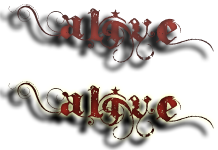
<style>
.page{position:relative;width:218px;height:150px;background:#ffffff}
.page>*{position:absolute;margin:0}
.t1{font:72px "Ithornt";letter-spacing:0.07em}
</style>
<div class="page">
<p class="t1" style="left:8px;top:4px;width:206px;height:59px;rotate:3deg">Alive</p>
<p class="t1" style="left:8px;top:81px;width:206px;height:59px;rotate:3deg">Alive</p>
</div>
